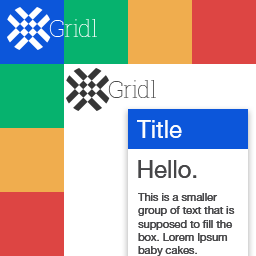
<style>
.page{position:relative;width:256px;height:256px;background:#ffffff}
.page>*{position:absolute;margin:0}
.t1{font:24px "HelveticaNeueLTPro-Roman";color:#fdfdfd}
.t2{font:24px "HelveticaNeueLTPro-Roman";color:#464648}
.t3{font:11px "HelveticaNeueLTPro-Roman";color:#464648}
</style>
<div class="page">
<p class="t1" style="left:137px;top:120px;width:45px;height:18px">Title</p>
<p class="t2" style="left:138px;top:160px;width:59px;height:18px">Hello.</p>
<p class="t3" style="left:138px;top:193px;width:97px;height:63px">This is a smaller group of text that is supposed to fill the box. Lorem Ipsum baby cakes.</p>
</div>
